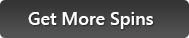
<style>
.page{position:relative;width:189px;height:38px}
.page>*{position:absolute;margin:0}
.t1{font:18px "SegoeUI-SemiBold";color:#ffffff}
</style>
<div class="page">
<p class="t1" style="left:28px;top:12px;width:125px;height:17px">Get More Spins</p>
</div>
